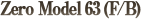
<style>
.page{position:relative;width:160px;height:19px;background:#ffffff}
.page>*{position:absolute;margin:0}
.t1{font:18px "RyuminPro-ExBold";letter-spacing:-0.08em;color:#4a3f32;font-weight:bold;scale:0.9 1}
</style>
<div class="page">
<p class="t1" style="left:0px;top:1px;width:141px;height:18px">Zero Model 63 (F/B)</p>
</div>
